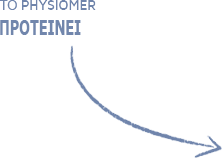
<style>
.page{position:relative;width:222px;height:159px;background:#ffffff}
.page>*{position:absolute;margin:0}
.t1{font:13.7px "ArialMT";color:#7186ac;scale:0.94 1}
.t2{font:19.8px "Verdana-Bold";color:#7186ac;scale:0.65 1}
</style>
<div class="page">
<p class="t1" style="left:0px;top:0px;width:17px;height:10px">ΤΟ</p>
<p class="t2" style="left:0px;top:20px;width:81px;height:15px">ΠΡΟΤΕΙΝΕΙ</p>
</div>
